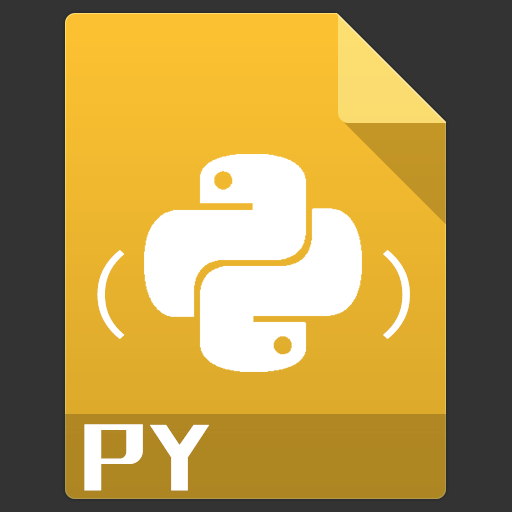
<style>
.page{position:relative;width:512px;height:512px;background:#333333}
.page>*{position:absolute;margin:0}
.t1{font:72px "MFLiHei_Noncommercial-Regular";letter-spacing:0.07em;color:#ffffff}
</style>
<div class="page">
<p class="t1" style="left:84px;top:424px;width:125px;height:67px">PY</p>
</div>
